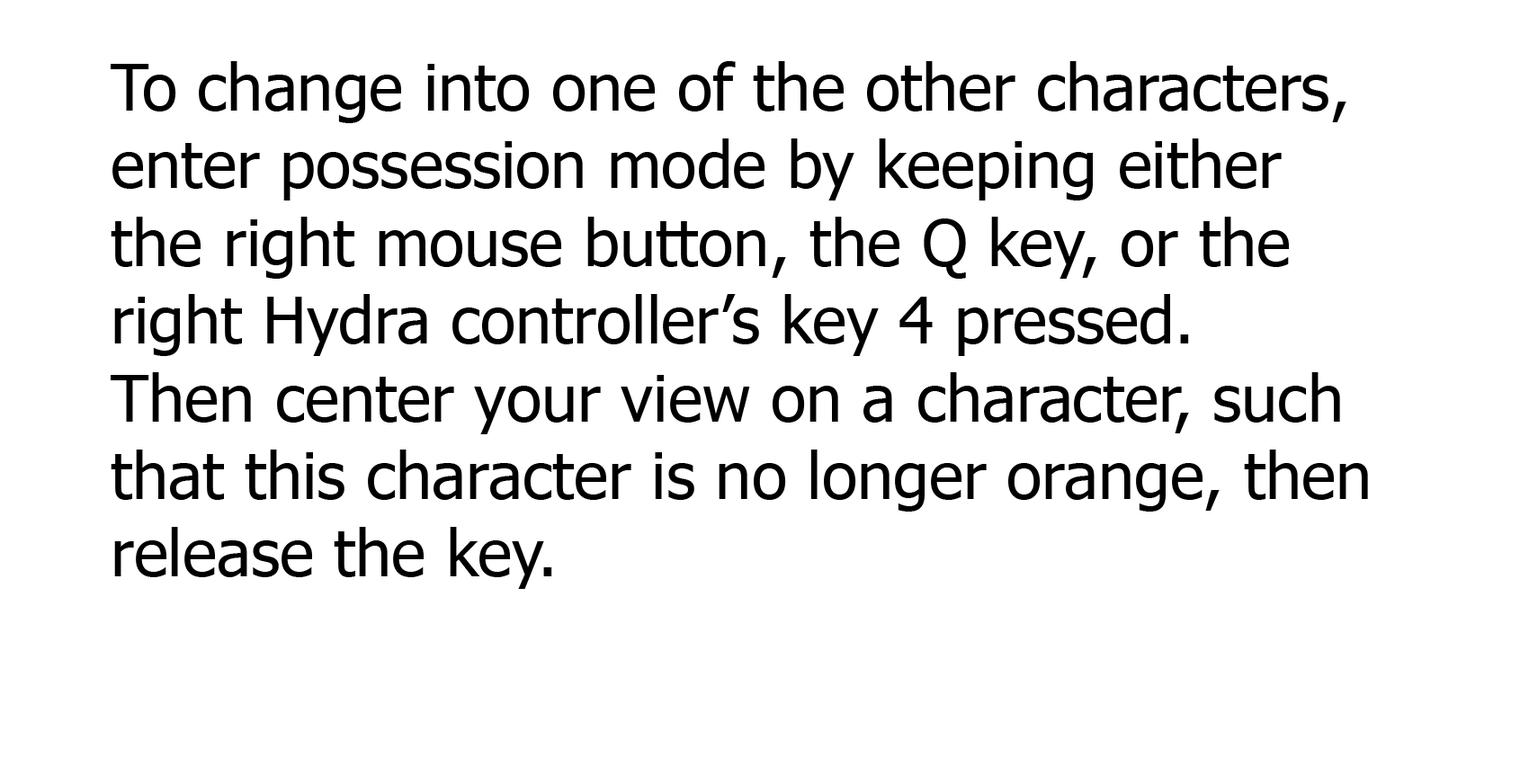
<style>
.page{position:relative;width:1538px;height:775px;background:#ffffff}
.page>*{position:absolute;margin:0}
.t1{font:64.8px "Tahoma";color:#000000}
</style>
<div class="page">
<p class="t1" style="left:111px;top:61px;width:1257px;height:528px">To change into one of the other characters,<br>enter possession mode by keeping either<br>the right mouse button, the Q key, or the<br>right Hydra controller’s key 4 pressed.<br>Then center your view on a character, such<br>that this character is no longer orange, then<br>release the key.</p>
</div>
